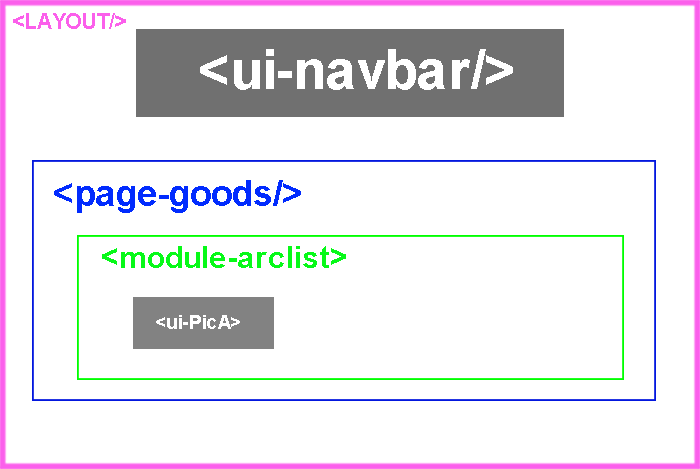
<style>
.page{position:relative;width:700px;height:469px;background:#ffffff}
.page>*{position:absolute;margin:0}
.t1{font:22.1px "Arial-BoldMT";color:#fb5feb;text-transform:uppercase}
.t2{font:54.6px "Arial-BoldMT";color:#ffffff}
.t3{font:35.9px "Arial-BoldMT";color:#012bfe}
.t4{font:31.1px "Arial-BoldMT";color:#07f918}
.t5{font:19.2px "Arial-BoldMT";color:#ffffff}
</style>
<div class="page">
<p class="t1" style="left:13px;top:13px;width:113px;height:16px">&lt;layout/&gt;</p>
<p class="t2" style="left:200px;top:49px;width:313px;height:41px">&lt;ui-navbar/&gt;</p>
<p class="t3" style="left:54px;top:180px;width:247px;height:33px">&lt;page-goods/&gt;</p>
<p class="t4" style="left:102px;top:246px;width:244px;height:22px">&lt;module-arclist&gt;</p>
<p class="t5" style="left:156px;top:315px;width:84px;height:14px">&lt;ui-PicA&gt;</p>
</div>
